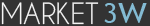
<style>
.page{position:relative;width:150px;height:26px;background:#333333}
.page>*{position:absolute;margin:0}
.t1{font:27.6px "CaviarDreams";color:#f5f5f5}
.t2{font:27.8px "TrebuchetMS";color:#83bbd3}
.t3{font:38px "TrebuchetMS";color:#83bbd3}
</style>
<div class="page">
<p class="t1" style="left:1px;top:2px;width:98px;height:23px">MARKET</p>
<p class="t2" style="left:104px;top:3px;width:43px;height:20px">3<span class="t3">w</span></p>
</div>
